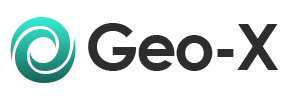
<style>
.page{position:relative;width:290px;height:99px;background:#ffffff}
.page>*{position:absolute;margin:0}
.t1{font:64.5px "CenturyGothic-Bold";letter-spacing:-0.05em;color:#2d2d2d}
</style>
<div class="page">
<p class="t1" style="left:88px;top:23px;width:190px;height:48px">Geo-X</p>
</div>
